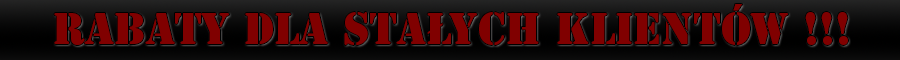
<style>
.page{position:relative;width:900px;height:60px;background:#800000}
.page>*{position:absolute;margin:0}
.t1{font:42px "StencilStd";color:#800000}
</style>
<div class="page">
<p class="t1" style="left:54px;top:4px;width:794px;height:41px">Rabaty dla staŁych klientÓw !!!</p>
</div>
